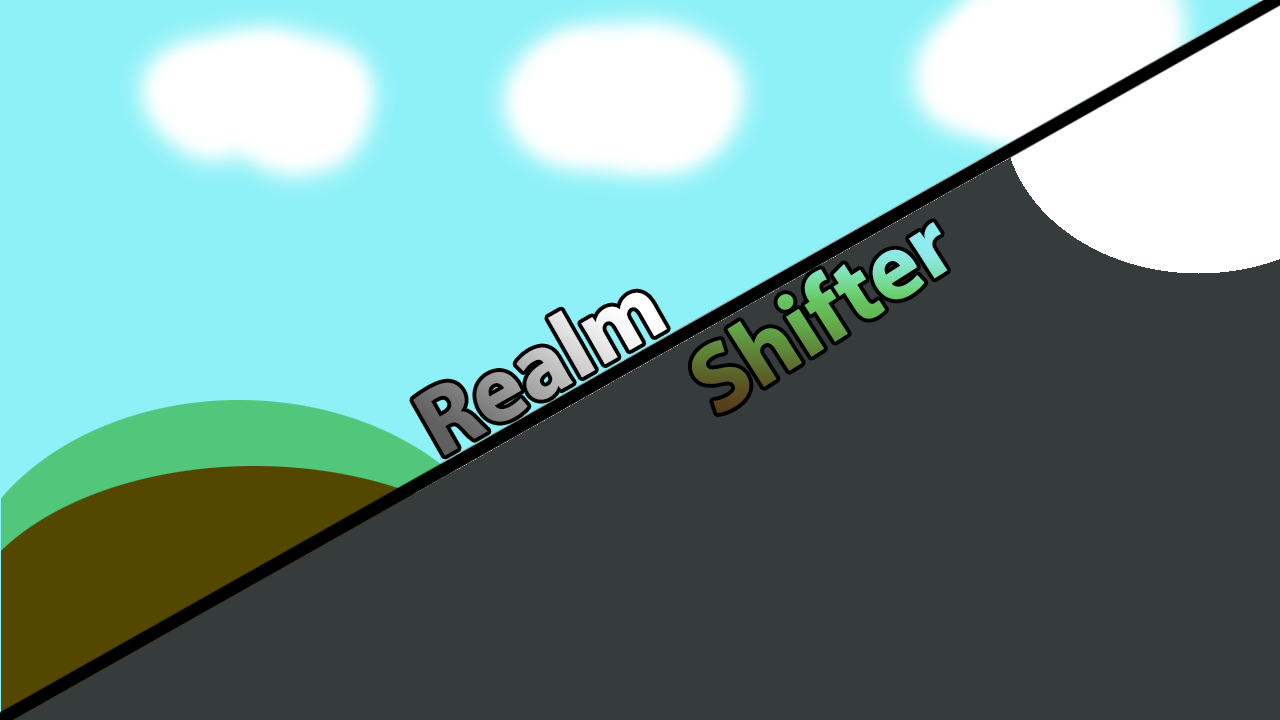
<style>
.page{position:relative;width:1280px;height:720px;background:#363b3c}
.page>*{position:absolute;margin:0}
.t1{font:96px "MyriadPro-Bold"}
</style>
<div class="page">
<p class="t1" style="left:692px;top:222px;width:255px;height:191px;rotate:-32deg">Shifter</p>
<p class="t1" style="left:413px;top:292px;width:254px;height:164px;rotate:-30deg">Realm</p>
</div>
